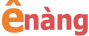
<style>
.page{position:relative;width:89px;height:36px;background:#ffffff}
.page>*{position:absolute;margin:0}
.t1{font:28px "Tahoma-Bold";color:#da5151;scale:0.94 1}
</style>
<div class="page">
<p class="t1" style="left:24px;top:6px;width:64px;height:30px">nàng</p>
</div>
